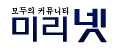
<style>
.page{position:relative;width:120px;height:50px;background:#ffffff}
.page>*{position:absolute;margin:0}
.t1{font:8px "AdobeMyungjoStd-Medium";color:#000000}
.t2{font:30px "HYsupM";color:#010d4a}
.t3{font:40px "HYsupM";color:#010d4a}
</style>
<div class="page">
<p class="t1" style="left:11px;top:6px;width:58px;height:9px">모두의 커뮤니티</p>
<p class="t2" style="left:12px;top:8px;width:95px;height:35px">미리<span class="t3">넷</span></p>
</div>
